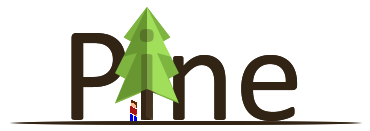
<style>
.page{position:relative;width:370px;height:131px;background:#ffffff}
.page>*{position:absolute;margin:0}
.t1{font:138px "Calibri"}
.t2{font:138px "Calibri";color:#322415}
</style>
<div class="page">
<p class="t1" style="left:139px;top:29px;width:15px;height:89px">i</p>
<p class="t2" style="left:71px;top:31px;width:227px;height:90px">Pine</p>
</div>
